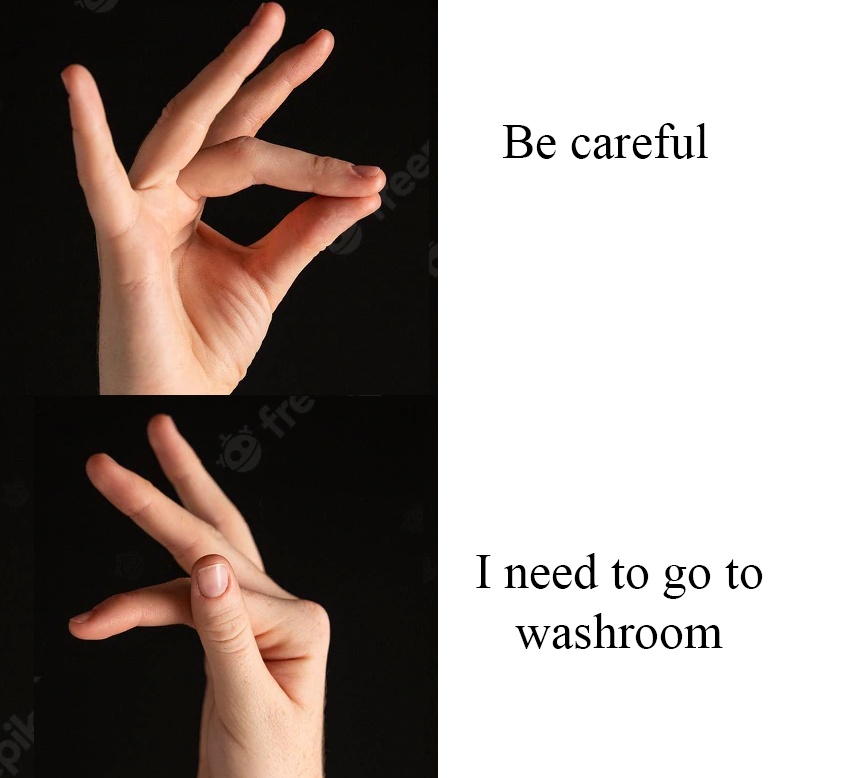
<style>
.page{position:relative;width:844px;height:778px;background:#ffffff}
.page>*{position:absolute;margin:0}
.t1{font:50px "TimesNewRomanPSMT";color:#000000}
</style>
<div class="page">
<p class="t1" style="left:502px;top:123px;width:206px;height:36px">Be careful</p>
<p class="t1" style="left:476px;top:553px;width:287px;height:96px;text-align:center">I need to go to washroom</p>
</div>
